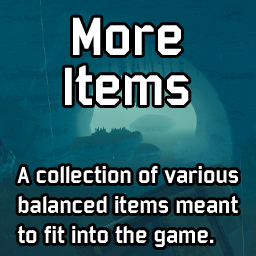
<style>
.page{position:relative;width:256px;height:256px}
.page>*{position:absolute;margin:0}
.t1{font:58.3px/50px "Bombardier";color:#ffffff}
.t2{font:25px "Bombardier";color:#ffffff}
</style>
<div class="page">
<p class="t1" style="left:65px;top:17px;width:124px;height:88px;text-align:center">More<br>Items</p>
<p class="t2" style="left:17px;top:166px;width:221px;height:81px">A collection of various<br>balanced items meant<br>to fit into the game.</p>
</div>
